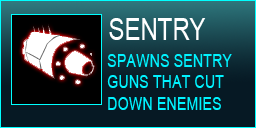
<style>
.page{position:relative;width:256px;height:128px;background:#061924}
.page>*{position:absolute;margin:0}
.t1{font:30px "ArialMT";color:#ffffff;scale:0.8 1}
.t2{font:18px "ArialMT";color:#00f3ff;scale:0.8 1}
</style>
<div class="page">
<p class="t1" style="left:109px;top:18px;width:97px;height:22px">SENTRY</p>
<p class="t2" style="left:107px;top:54px;width:125px;height:56px">SPAWNS SENTRY<br>GUNS THAT CUT<br>DOWN ENEMIES</p>
</div>
